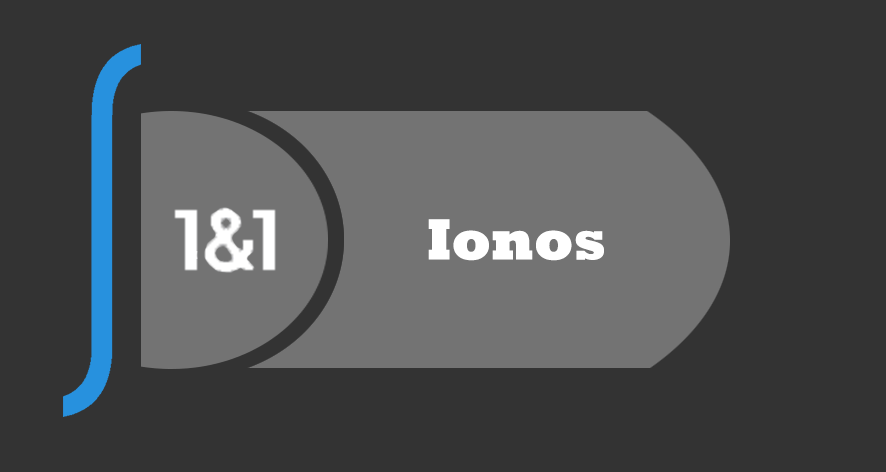
<style>
.page{position:relative;width:886px;height:472px;background:#333333}
.page>*{position:absolute;margin:0}
.t1{font:58.8px "Rockwell-ExtraBold";color:#ffffff;scale:0.9 1}
</style>
<div class="page">
<p class="t1" style="left:428px;top:219px;width:176px;height:42px">Ionos</p>
</div>
